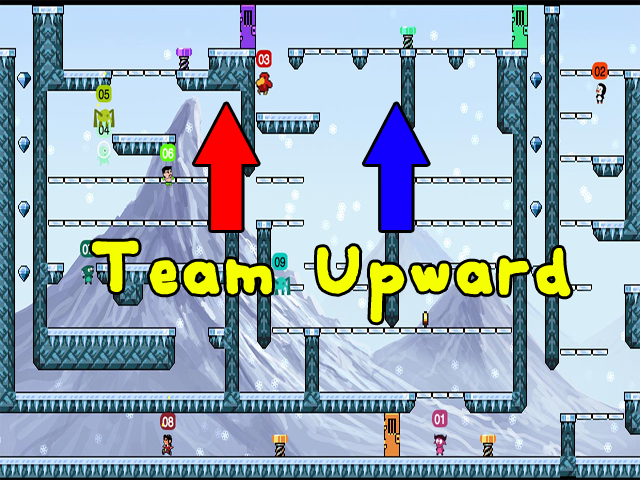
<style>
.page{position:relative;width:640px;height:480px}
.page>*{position:absolute;margin:0}
.t1{font:72px "ComiquitaSans";color:#f6ff00;font-weight:bold}
</style>
<div class="page">
<p class="t1" style="left:92px;top:240px;width:479px;height:83px">Team Upward</p>
</div>
